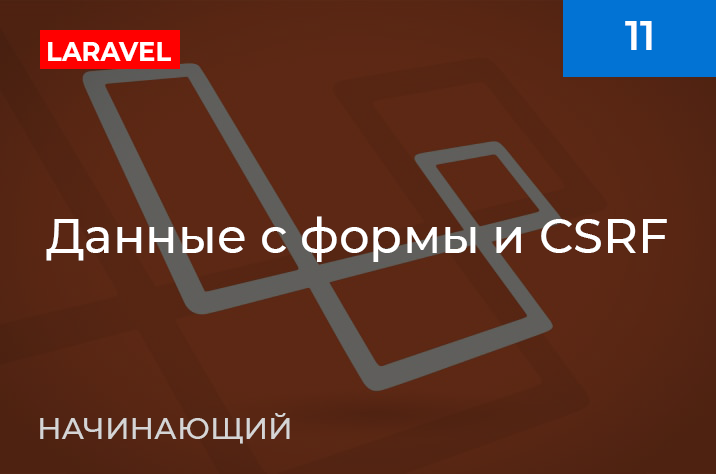
<style>
.page{position:relative;width:716px;height:474px}
.page>*{position:absolute;margin:0}
.t1{font:40px "Montserrat-SemiBold";color:#ffffff}
.t2{font:27px "Montserrat-Bold";color:#ffffff;scale:0.95 1}
.t3{font:48px "Montserrat-Medium";color:#ffffff}
.t4{font:30px "Montserrat-Medium";color:#d5d5d5}
</style>
<div class="page">
<p class="t1" style="left:625px;top:21px;width:27px;height:29px">11</p>
<p class="t2" style="left:48px;top:42px;width:123px;height:19px">LARAVEL</p>
<p class="t3" style="left:46px;top:216px;width:621px;height:46px">Данные с формы и CSRF</p>
<p class="t4" style="left:40px;top:413px;width:250px;height:31px">НАЧИНАЮЩИЙ</p>
</div>
